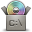
<style>
.page{position:relative;width:32px;height:32px;background:#ffffff}
.page>*{position:absolute;margin:0}
.t1{font:10.3px "CourierNewPS-BoldMT";letter-spacing:-0.125em}
.t2{font:10.3px "CourierNewPS-BoldMT";letter-spacing:-0.2em}
.t3{font:8px "CourierNewPS-BoldMT";letter-spacing:-0.1em}
</style>
<div class="page">
<p class="t1" style="left:9px;top:19px;width:13px;height:8px">C<span class="t2">:</span><span class="t3">\</span></p>
</div>
